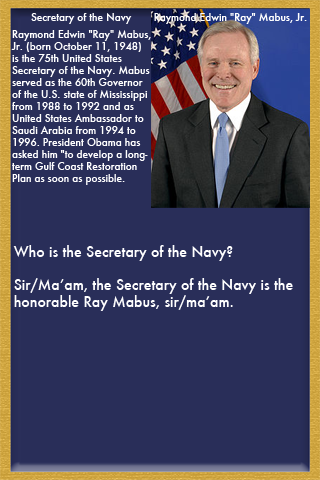
<style>
.page{position:relative;width:320px;height:480px;background:#292e59}
.page>*{position:absolute;margin:0}
.t1{font:10px "Futura-Medium";color:#ffffff}
.t2{font:14px "Futura-Medium";color:#ffffff}
</style>
<div class="page">
<p class="t1" style="left:31px;top:13px;width:101px;height:11px">Secretary of the Navy</p>
<p class="t1" style="left:154px;top:13px;width:153px;height:11px">Raymond Edwin "Ray" Mabus, Jr.</p>
<p class="t1" style="left:11px;top:30px;width:140px;height:155px">Raymond Edwin "Ray" Mabus, <br>Jr. (born October 11, 1948) <br>is the 75th United States <br>Secretary of the Navy. Mabus <br>served as the 60th Governor <br>of the U.S. state of Mississippi <br>from 1988 to 1992 and as <br>United States Ambassador to <br>Saudi Arabia from 1994 to <br>1996. President Obama has <br>asked him "to develop a long-<br>term Gulf Coast Restoration <br>Plan as soon as possible.</p>
<p class="t2" style="left:13px;top:245px;width:280px;height:66px">Who is the Secretary of the Navy?<br><br>Sir/Ma’am, the Secretary of the Navy is the <br>honorable Ray Mabus, sir/ma’am.</p>
</div>
